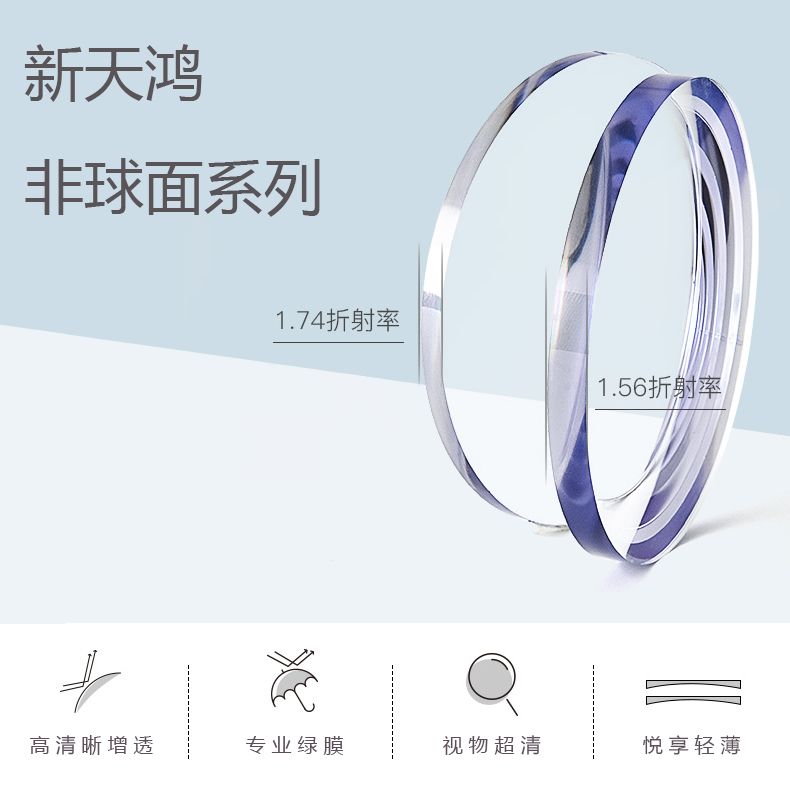
<style>
.page{position:relative;width:790px;height:786px;background:#ccdde7}
.page>*{position:absolute;margin:0}
.t1{font:60px/19px "MicrosoftYaHei";color:#595458}
.t2{font:20px "MicrosoftYaHei";color:#5c4f5a}
</style>
<div class="page">
<p class="t1" style="left:24px;top:44px;width:296px;height:173px">新天鸿<br><br><br><br><br><br>非球面系列</p>
<p class="t2" style="left:30px;top:735px;width:123px;height:20px">高 清 晰 增 透</p>
<p class="t2" style="left:246px;top:736px;width:97px;height:19px">专 业 绿 膜</p>
<p class="t2" style="left:443px;top:735px;width:98px;height:20px">视 物 超 清</p>
<p class="t2" style="left:643px;top:735px;width:98px;height:20px">悦 享 轻 薄</p>
</div>
